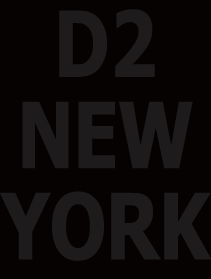
<style>
.page{position:relative;width:211px;height:279px;background:#050201}
.page>*{position:absolute;margin:0}
.t1{font:91.2px/30.4px "Tahoma-Bold";color:#1d1b1b;scale:0.81 1}
</style>
<div class="page">
<p class="t1" style="left:0px;top:9px;width:212px;height:252px;text-align:center">D2<br><br><br>NEW<br><br><br>YORK</p>
</div>
